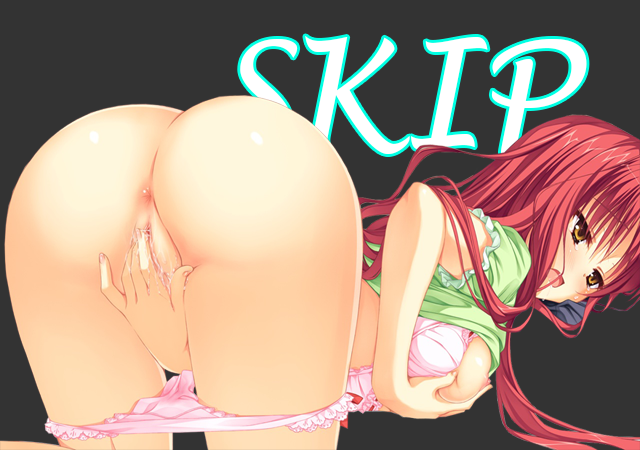
<style>
.page{position:relative;width:640px;height:450px;background:#333333}
.page>*{position:absolute;margin:0}
.t1{font:144px "LucidaHandwriting-Italic";color:#ffffff}
</style>
<div class="page">
<p class="t1" style="left:221px;top:36px;width:366px;height:119px">SKIP</p>
</div>
